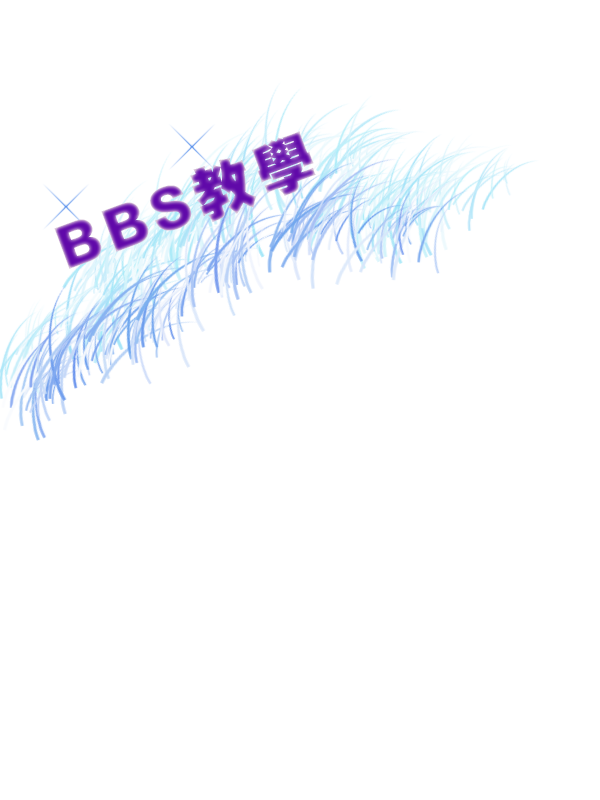
<style>
.page{position:relative;width:600px;height:800px;background:#ffffff}
.page>*{position:absolute;margin:0}
.t1{font:60px "DFHei-UB-HKP-BF";letter-spacing:0.1em;text-transform:uppercase}
</style>
<div class="page">
<p class="t1" style="left:54px;top:131px;width:262px;height:138px;rotate:-20deg">BBS教學</p>
</div>
